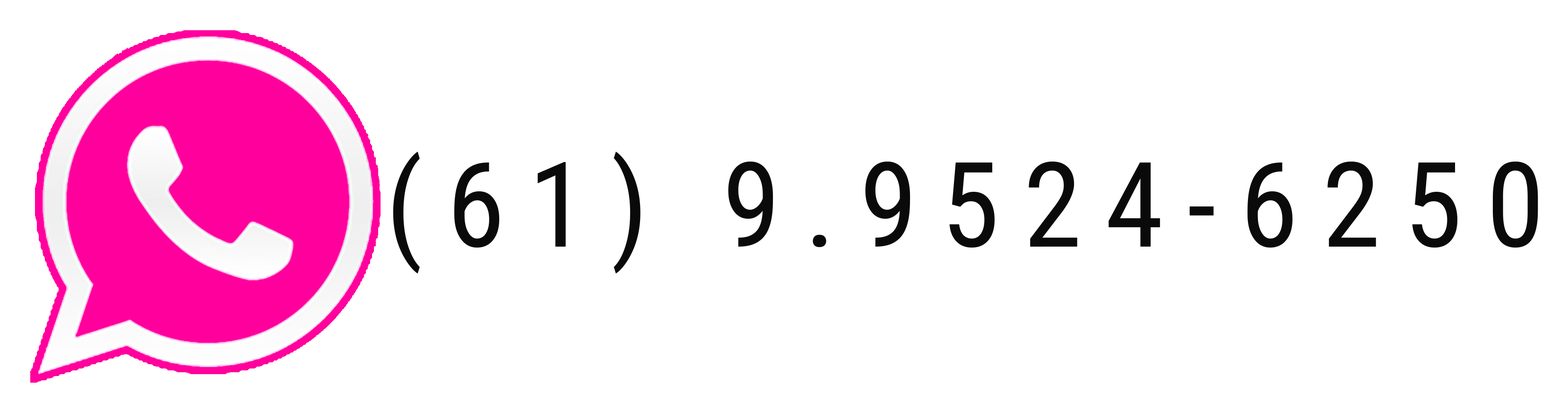
<style>
.page{position:relative;width:1568px;height:411px;background:#ffffff}
.page>*{position:absolute;margin:0}
.t1{font:118.2px "RobotoCondensed-Regular";letter-spacing:0.2em;color:#0a0a0a}
</style>
<div class="page">
<p class="t1" style="left:393px;top:152px;width:1145px;height:122px">(61) 9.9524-6250</p>
</div>
